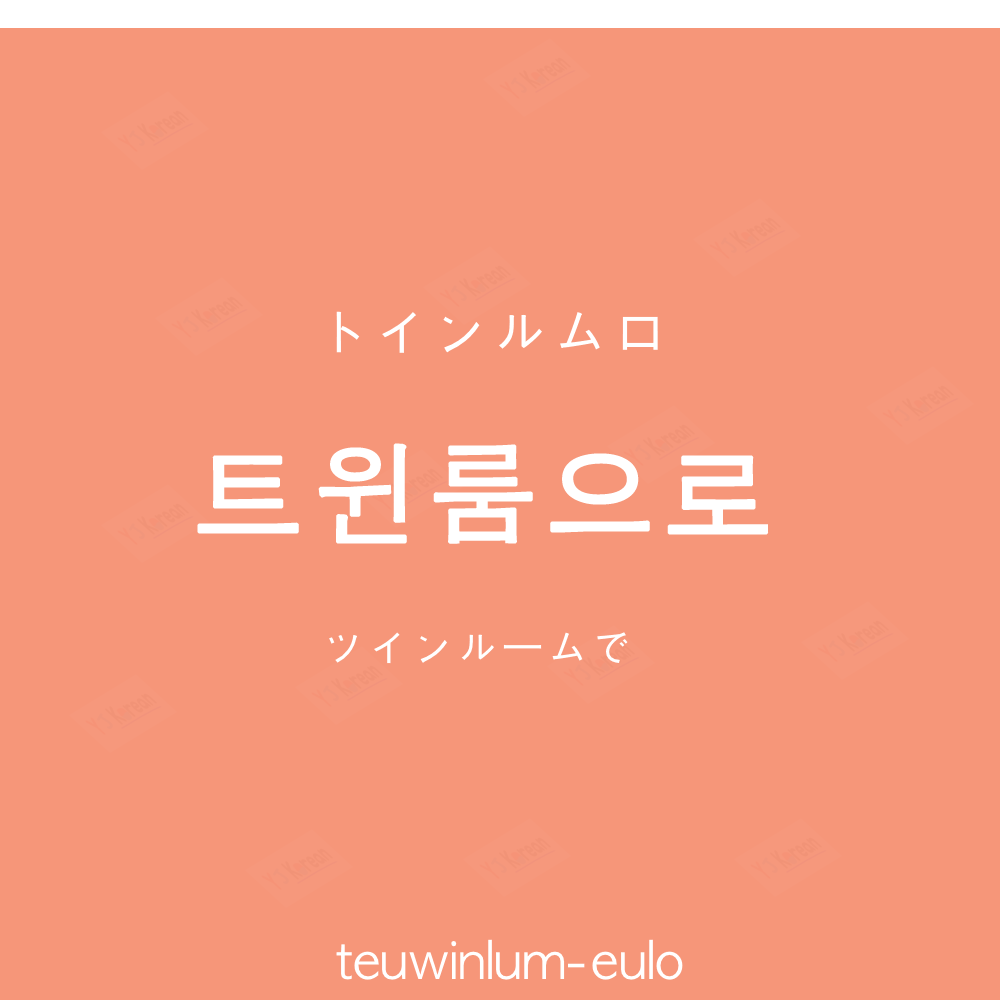
<style>
.page{position:relative;width:1000px;height:1000px;background:#f69679}
.page>*{position:absolute;margin:0}
.t1{font:60px "AppleGothic";color:#ffffff}
.t2{font:110px "AppleGothic";letter-spacing:0.04em;color:#ffffff;font-weight:bold}
.t3{font:45px "AppleGothic";color:#ffffff}
.t4{font:45px "HiraKakuProN-W3";color:#ffffff}
.t5{font:50px "AppleGothic";color:#ffffff}
</style>
<div class="page">
<p class="t1" style="left:336px;top:311px;width:322px;height:42px">トインルムロ</p>
<p class="t2" style="left:197px;top:443px;width:572px;height:101px">트윈룸으로</p>
<p class="t3" style="left:329px;top:632px;width:299px;height:32px">ツインル<span class="t4">ー</span>ムで</p>
<p class="t5" style="left:336px;top:939px;width:347px;height:41px">teuwinlum-eulo</p>
</div>
